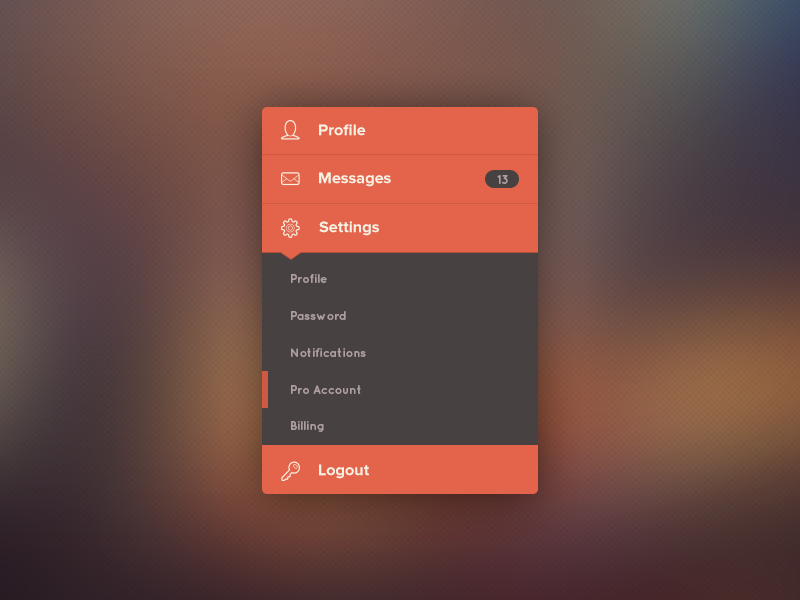
<style>
.page{position:relative;width:800px;height:600px}
.page>*{position:absolute;margin:0}
.t1{font:16px "ProximaNova-Bold";color:#f7f1e3}
.t2{font:12px "QuicksandBold-Regular";color:#ae9f9f}
</style>
<div class="page">
<p class="t1" style="left:319px;top:124px;width:47px;height:12px">Profile</p>
<p class="t1" style="left:319px;top:172px;width:72px;height:15px">Messages</p>
<p class="t2" style="left:497px;top:175px;width:11px;height:9px">13</p>
<p class="t1" style="left:319px;top:221px;width:60px;height:15px">Settings</p>
<p class="t2" style="left:291px;top:274px;width:36px;height:9px">Profile</p>
<p class="t2" style="left:291px;top:311px;width:55px;height:9px">Password</p>
<p class="t2" style="left:291px;top:348px;width:75px;height:9px">Notifications</p>
<p class="t2" style="left:291px;top:385px;width:70px;height:9px">Pro Account</p>
<p class="t2" style="left:291px;top:421px;width:33px;height:11px">Billing</p>
<p class="t1" style="left:319px;top:464px;width:50px;height:15px">Logout</p>
</div>
